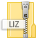
<style>
.page{position:relative;width:40px;height:40px;background:#ffffff}
.page>*{position:absolute;margin:0}
.t1{font:8px "SegoeUI"}
</style>
<div class="page">
<p class="t1" style="left:9px;top:21px;width:11px;height:7px">LIZ</p>
</div>
